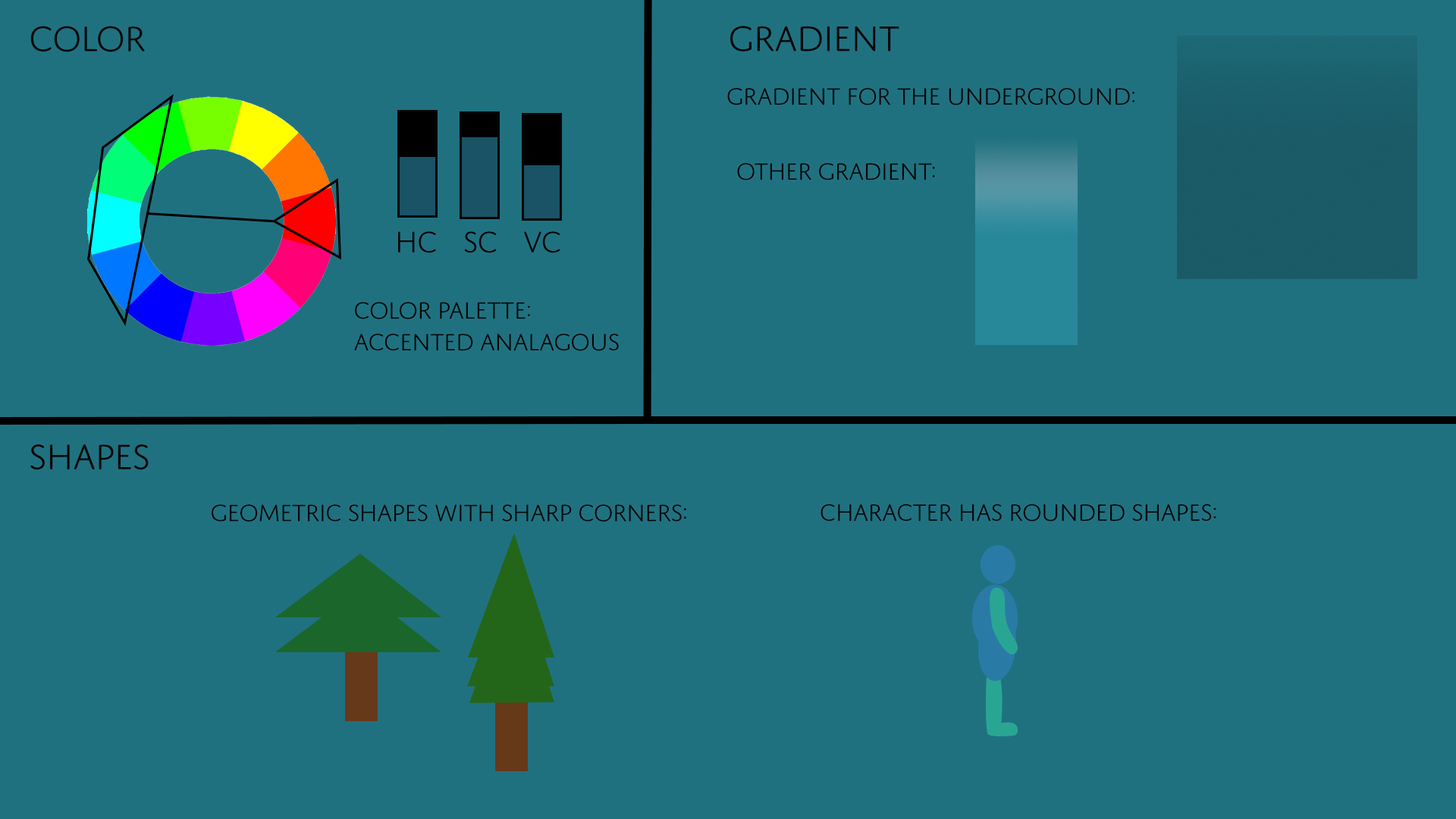
<style>
.page{position:relative;width:1456px;height:819px;background:#207180}
.page>*{position:absolute;margin:0}
.t1{font:37.9px "DomusTitlingLight";letter-spacing:-0.04em;color:#060606}
.t2{font:25.3px "DomusTitlingLight";letter-spacing:-0.04em;color:#060606}
.t3{font:31.6px "DomusTitlingLight";letter-spacing:-0.04em;color:#060606}
.t4{font:25.3px/31.6px "DomusTitlingLight";letter-spacing:-0.04em;color:#060606}
.t5{font:25.3px/119.1px "DomusTitlingLight";letter-spacing:-0.04em;color:#060606}
</style>
<div class="page">
<p class="t1" style="left:30px;top:26px;width:115px;height:26px">Color</p>
<p class="t1" style="left:730px;top:26px;width:169px;height:26px">Gradient</p>
<p class="t2" style="left:727px;top:88px;width:407px;height:17px">Gradient for the underground:</p>
<p class="t2" style="left:737px;top:163px;width:198px;height:17px">other gradient:</p>
<p class="t3" style="left:398px;top:231px;width:38px;height:22px">HC</p>
<p class="t3" style="left:464px;top:231px;width:33px;height:22px">SC</p>
<p class="t3" style="left:524px;top:231px;width:36px;height:22px">VC</p>
<p class="t4" style="left:354px;top:302px;width:265px;height:49px"><span class="t5">Color palette:</span><br>accented analagous</p>
<p class="t1" style="left:30px;top:444px;width:119px;height:26px">shapes</p>
<p class="t2" style="left:212px;top:504px;width:474px;height:18px">Geometric shapes with sharp corners:</p>
<p class="t2" style="left:821px;top:504px;width:395px;height:18px">Character has rounded shapes:</p>
</div>
